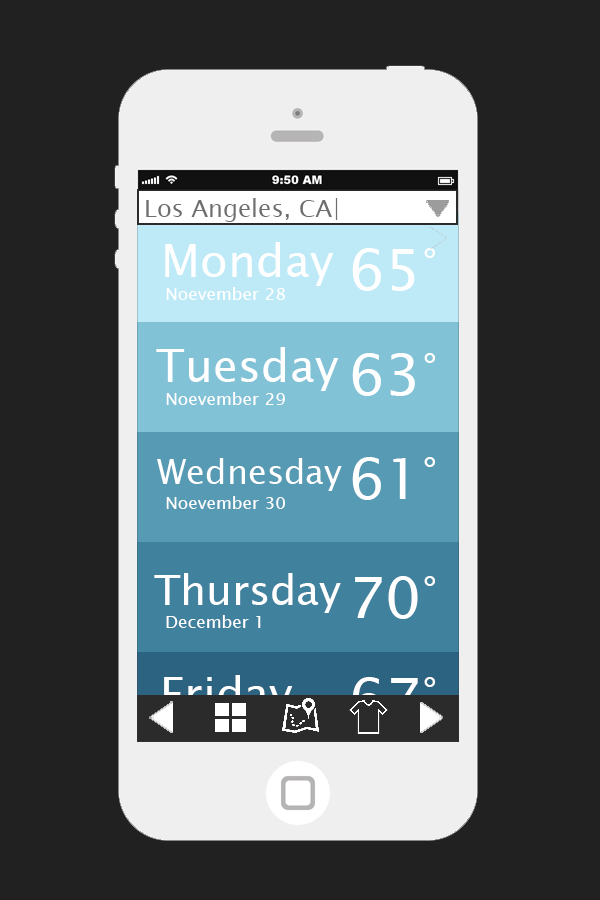
<style>
.page{position:relative;width:600px;height:900px;background:#212121}
.page>*{position:absolute;margin:0}
.t1{font:24px "LucidaSansUnicode";color:#6e6e6e}
.t2{font:45.4px "LucidaSansUnicode";color:#ffffff}
.t3{font:56.7px "LucidaSansUnicode";color:#ffffff}
.t4{font:56.7px "Gulim";color:#ffffff}
.t5{font:17px "LucidaSansUnicode";color:#ffffff}
.t6{font:34px "LucidaSansUnicode";color:#ffffff}
.t7{font:41.6px "LucidaSansUnicode";color:#ffffff}
.t8{font:45.4px "LucidaSansUnicode"}
.t9{font:56.7px "LucidaSansUnicode"}
.t10{font:56.7px "Gulim"}
</style>
<div class="page">
<p class="t1" style="left:146px;top:198px;width:192px;height:24px">Los Angeles, CA|</p>
<p class="t2" style="left:165px;top:242px;width:169px;height:44px">Monday</p>
<p class="t3" style="left:352px;top:248px;width:83px;height:43px">65<span class="t4">˚</span></p>
<p class="t5" style="left:166px;top:287px;width:119px;height:13px">Noevember 28</p>
<p class="t2" style="left:156px;top:347px;width:183px;height:44px">Tuesday</p>
<p class="t3" style="left:352px;top:353px;width:83px;height:43px">63<span class="t4">˚</span></p>
<p class="t5" style="left:166px;top:392px;width:119px;height:13px">Noevember 29</p>
<p class="t6" style="left:157px;top:458px;width:185px;height:33px">Wednesday</p>
<p class="t3" style="left:352px;top:457px;width:83px;height:43px">61<span class="t4">˚</span></p>
<p class="t5" style="left:166px;top:496px;width:119px;height:13px">Noevember 30</p>
<p class="t7" style="left:154px;top:573px;width:187px;height:40px">Thursday</p>
<p class="t3" style="left:355px;top:576px;width:80px;height:43px">70<span class="t4">˚</span></p>
<p class="t5" style="left:166px;top:615px;width:95px;height:13px">December 1</p>
<p class="t8" style="left:164px;top:675px;width:129px;height:44px">Friday</p>
<p class="t9" style="left:352px;top:677px;width:83px;height:43px">67<span class="t10">˚</span></p>
</div>
